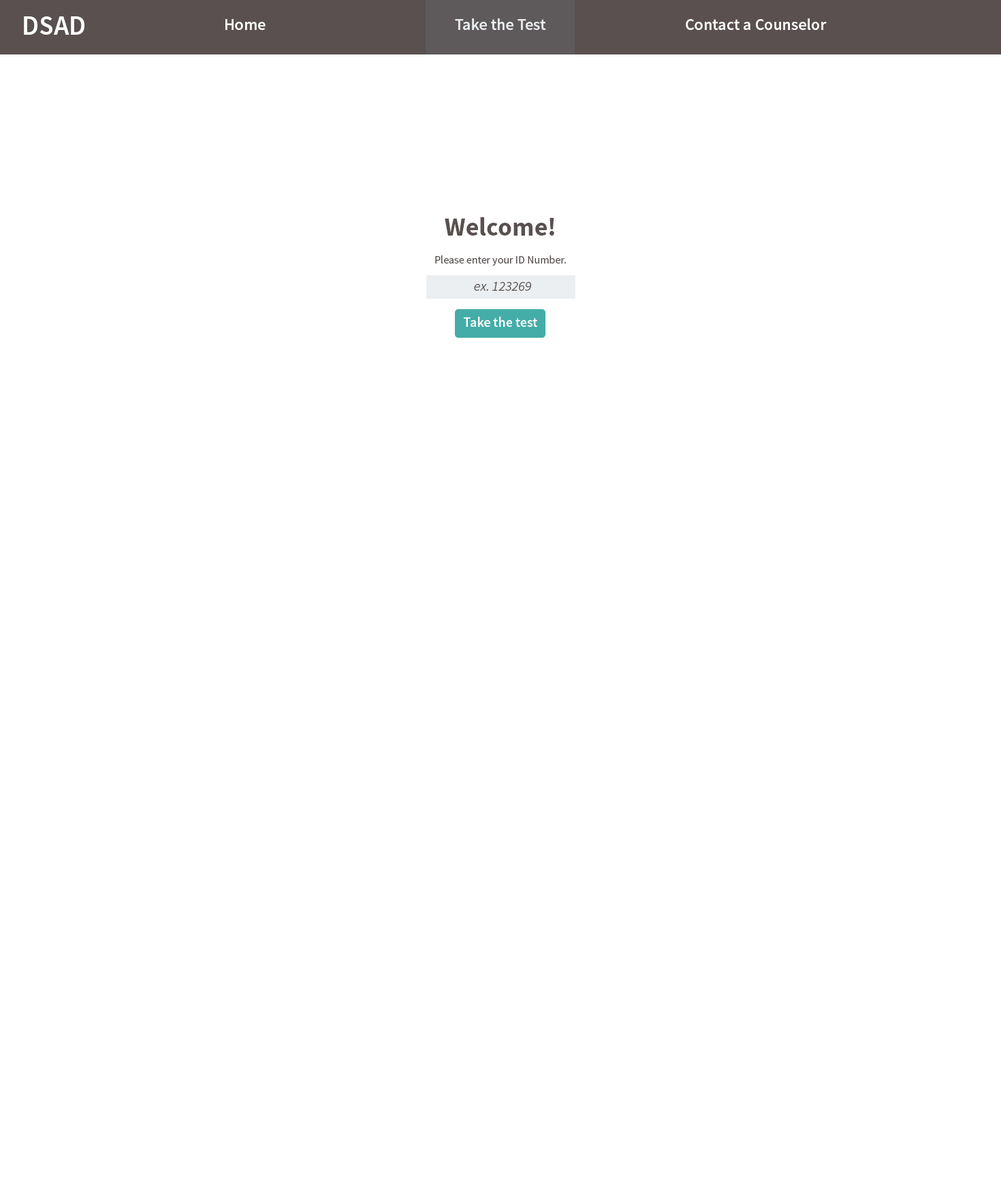
<style>
.page{position:relative;width:1001px;height:1191px;background:#ffffff}
.page>*{position:absolute;margin:0}
.t1{font:27.2px "SourceSansPro-Semibold";color:#ffffff}
.t2{font:16.3px "SourceSansPro-Semibold";color:#ffffff}
.t3{font:10.9px "SourceSansPro-Regular";color:#5a5050}
.t4{font:25.9px/32.7px "SourceSansPro-Bold";color:#5a5050}
.t5{font:13.6px "SourceSansPro-It";color:#5a5050}
.t6{font:13.6px "SourceSansPro-Semibold";color:#ffffff}
</style>
<div class="page">
<p class="t1" style="left:24px;top:16px;width:60px;height:19px">DSAD</p>
<p class="t2" style="left:225px;top:19px;width:41px;height:11px">Home</p>
<p class="t2" style="left:455px;top:18px;width:91px;height:12px">Take the Test</p>
<p class="t2" style="left:686px;top:18px;width:141px;height:12px">Contact a Counselor</p>
<p class="t3" style="left:435px;top:217px;width:131px;height:49px;text-align:center"><span class="t4">Welcome!<br></span>Please enter your ID Number.</p>
<p class="t5" style="left:474px;top:282px;width:57px;height:9px">ex. 123269</p>
<p class="t6" style="left:464px;top:317px;width:73px;height:10px">Take the test</p>
</div>
